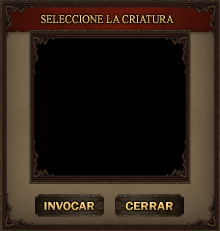
<style>
.page{position:relative;width:220px;height:231px;background:#000000}
.page>*{position:absolute;margin:0}
.t1{font:11px "TimesNewRomanPSMT";color:#fdcc6a;text-transform:uppercase;font-weight:bold;scale:0.9 1}
.t2{font:12px "FranklinGothic-Demi";scale:1.07 1}
</style>
<div class="page">
<p class="t1" style="left:41px;top:15px;width:133px;height:9px">Seleccione la criatura</p>
<p class="t2" style="left:44px;top:201px;width:50px;height:10px">INVOCAR</p>
<p class="t2" style="left:125px;top:201px;width:48px;height:10px">CERRAR</p>
</div>
